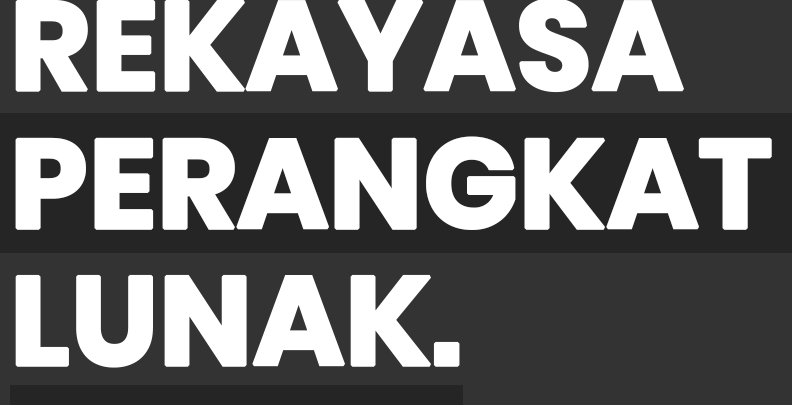
<style>
.page{position:relative;width:792px;height:405px;background:#333333}
.page>*{position:absolute;margin:0}
.t1{font:125px/137.5px "Poppins-Bold";letter-spacing:-0.02em;color:#ffffff;font-weight:bold}
</style>
<div class="page">
<p class="t1" style="left:15px;top:0px;width:757px;height:368px">REKAYASA<br>PERANGKAT<br>LUNAK.</p>
</div>
